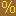
<style>
.page{position:relative;width:16px;height:16px;background:#996633}
.page>*{position:absolute;margin:0}
.t1{font:18px "Sylfaen";color:#f5e814}
</style>
<div class="page">
<p class="t1" style="left:2px;top:1px;width:13px;height:12px">%</p>
</div>
